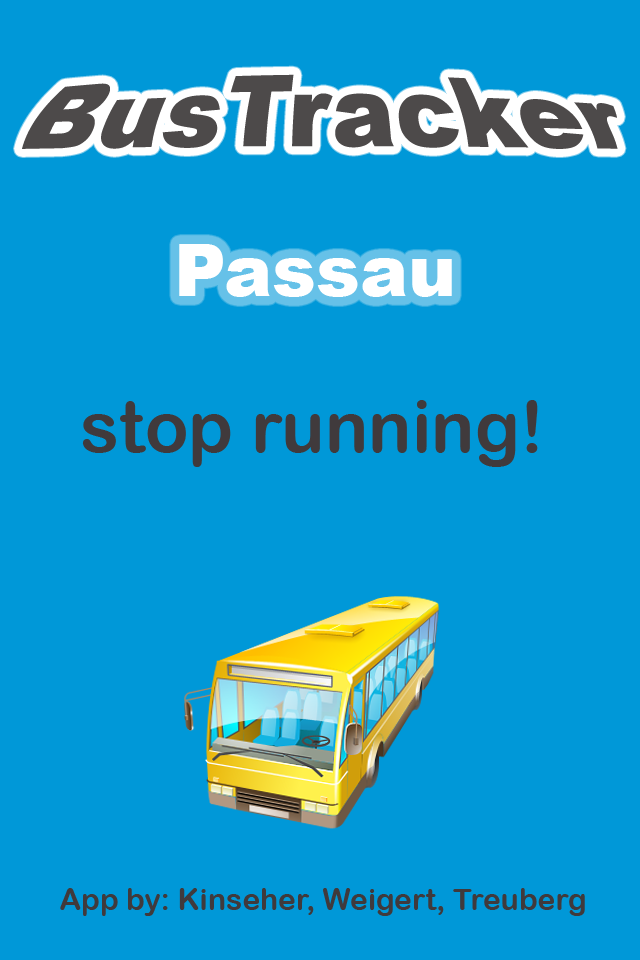
<style>
.page{position:relative;width:640px;height:960px;background:#0098d8}
.page>*{position:absolute;margin:0}
.t1{font:80px "Arial-Black";color:#4d4a4a}
.t2{font:72px "Arial-Black";color:#ffffff}
.t3{font:72px "ArialRoundedMTBold";color:#403a3c}
.t4{font:30px "ArialRoundedMTBold";color:#403a3c}
</style>
<div class="page">
<p class="t1" style="left:22px;top:74px;width:596px;height:75px">BusTracker</p>
<p class="t2" style="left:179px;top:244px;width:273px;height:53px">Passau</p>
<p class="t3" style="left:82px;top:400px;width:456px;height:67px">stop running!</p>
<p class="t4" style="left:60px;top:888px;width:525px;height:28px">App by: Kinseher, Weigert, Treuberg</p>
</div>
